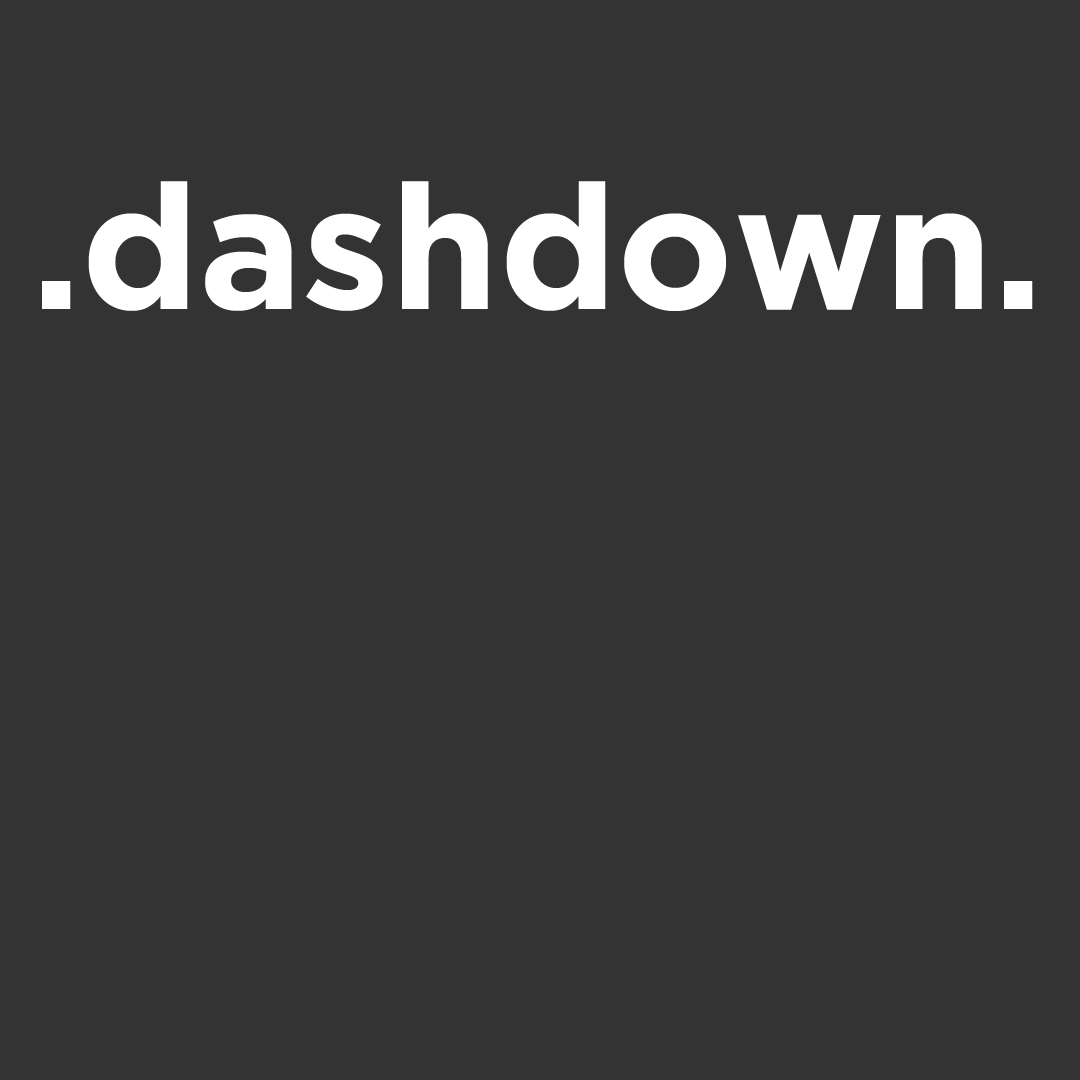
<style>
.page{position:relative;width:1080px;height:1080px;background:#333333}
.page>*{position:absolute;margin:0}
.t1{font:175px "GothamBold";color:#ffffff}
</style>
<div class="page">
<p class="t1" style="left:42px;top:181px;width:991px;height:130px">.dashdown.</p>
</div>
